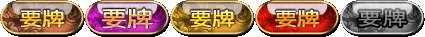
<style>
.page{position:relative;width:425px;height:37px}
.page>*{position:absolute;margin:0}
.t1{font:17.6px "STXihei";color:#868585;font-weight:bold;scale:1.38 1}
</style>
<div class="page">
<p class="t1" style="left:358px;top:9px;width:49px;height:18px">要牌</p>
</div>
